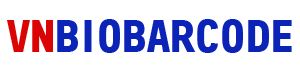
<style>
.page{position:relative;width:300px;height:70px;background:#ffffff}
.page>*{position:absolute;margin:0}
.t1{font:47px "FreeroadBold";color:#0b23b6}
.t2{font:47px "FreeroadBold";color:#db0404}
</style>
<div class="page">
<p class="t1" style="left:7px;top:19px;width:285px;height:34px"><span class="t2">VN</span>BIOBARCODE</p>
</div>
